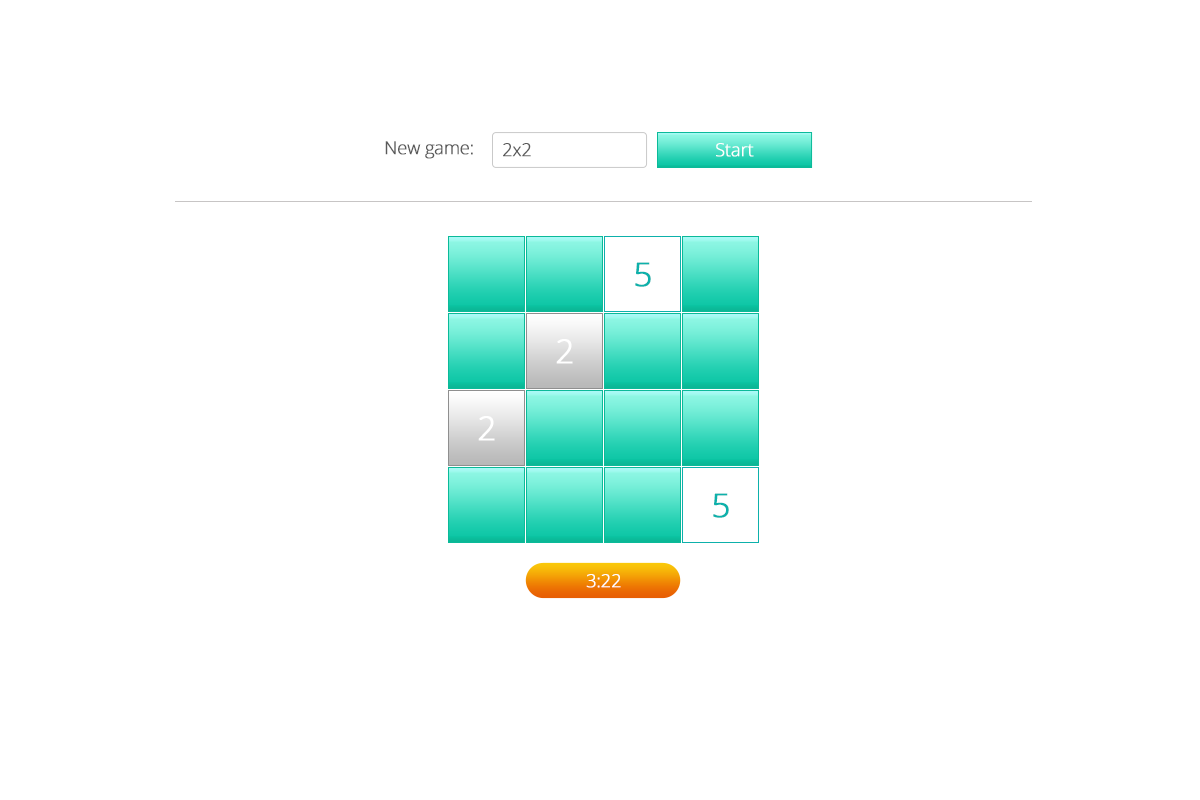
<style>
.page{position:relative;width:1200px;height:800px;background:#ffffff}
.page>*{position:absolute;margin:0}
.t1{font:18px "OpenSans-Light";letter-spacing:-0.025em;color:#5a5a5a;font-weight:bold}
.t2{font:18px "OpenSans-Light";letter-spacing:-0.025em;color:#ffffff;font-weight:bold}
.t3{font:33px "OpenSans-Light";letter-spacing:-0.025em;color:#0db1ab;font-weight:bold}
.t4{font:33px "OpenSans-Light";letter-spacing:-0.025em;color:#ffffff;font-weight:bold}
</style>
<div class="page">
<p class="t1" style="left:385px;top:141px;width:88px;height:18px">New game:</p>
<p class="t1" style="left:503px;top:143px;width:28px;height:14px">2x2</p>
<p class="t2" style="left:716px;top:143px;width:38px;height:14px">Start</p>
<p class="t3" style="left:635px;top:262px;width:16px;height:25px">5</p>
<p class="t4" style="left:556px;top:339px;width:17px;height:25px">2</p>
<p class="t4" style="left:478px;top:416px;width:17px;height:25px">2</p>
<p class="t3" style="left:713px;top:493px;width:16px;height:25px">5</p>
<p class="t2" style="left:586px;top:574px;width:35px;height:14px">3:22</p>
</div>
